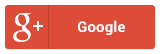
<style>
.page{position:relative;width:160px;height:54px;background:#dd4b39}
.page>*{position:absolute;margin:0}
.t1{font:15px "Roboto-Bold";letter-spacing:0.01em;color:#ffffff}
</style>
<div class="page">
<p class="t1" style="left:78px;top:20px;width:47px;height:15px">Google</p>
</div>
